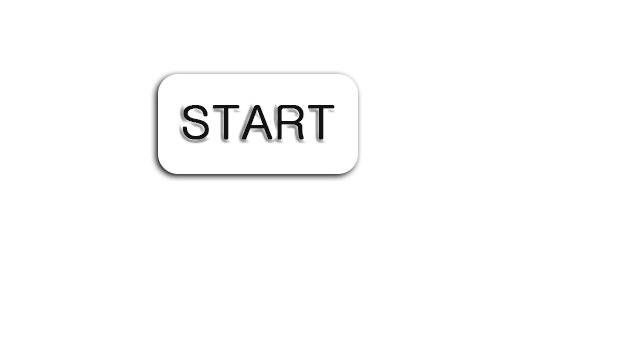
<style>
.page{position:relative;width:636px;height:347px;background:#ffffff}
.page>*{position:absolute;margin:0}
.t1{font:48px "Gulim";color:#121212;font-weight:bold}
.t2{font:48px "Gulim";color:#121212}
</style>
<div class="page">
<p class="t1" style="left:182px;top:105px;width:153px;height:35px"><span class="t2"><br><br><br><br><br></span>START</p>
</div>
